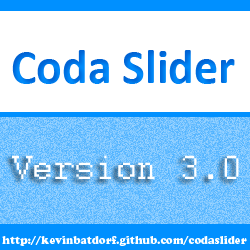
<style>
.page{position:relative;width:250px;height:250px;background:#ffffff}
.page>*{position:absolute;margin:0}
.t1{font:37px "Courier";color:#ffffff}
.t2{font:10.5px "CooperBlackStd";color:#ffffff}
</style>
<div class="page">
<p class="t1" style="left:12px;top:155px;width:227px;height:24px">Version 3.0</p>
<p class="t2" style="left:2px;top:236px;width:245px;height:10px">http://kevinbatdorf.github.com/codaslider</p>
</div>
